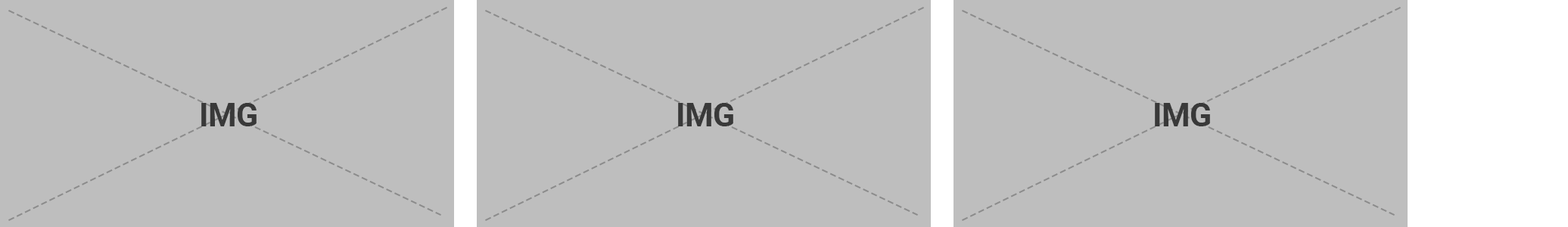
<style>
.page{position:relative;width:1568px;height:227px;background:#bebebe}
.page>*{position:absolute;margin:0}
.t1{font:32.2px "Roboto-Bold";color:#393939}
</style>
<div class="page">
<p class="t1" style="left:201px;top:103px;width:56px;height:23px">IMG</p>
<p class="t1" style="left:678px;top:103px;width:55px;height:23px">IMG</p>
<p class="t1" style="left:1155px;top:103px;width:55px;height:23px">IMG</p>
</div>
